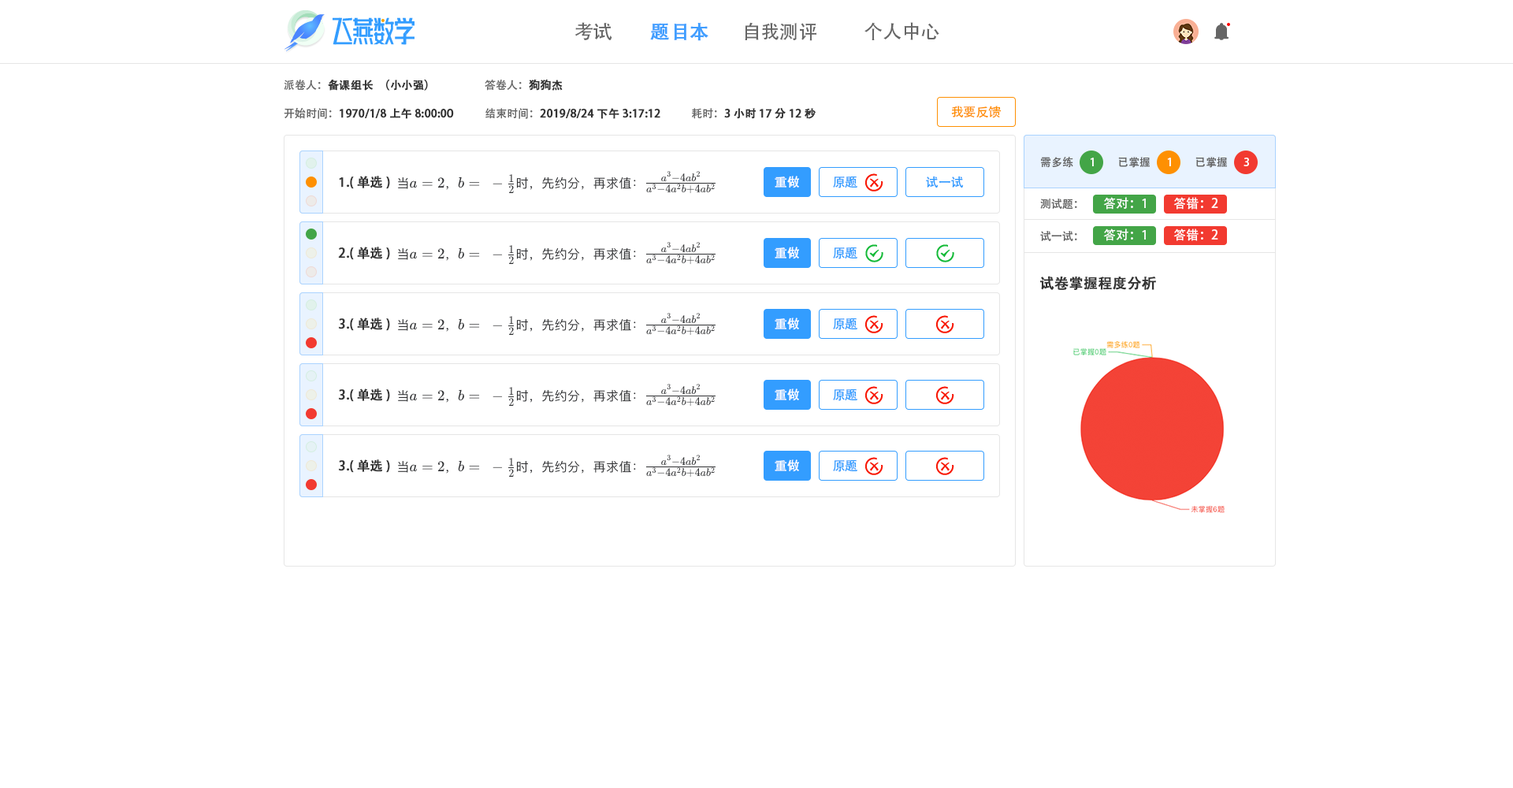
<style>
.page{position:relative;width:1513px;height:788px;background:#ffffff}
.page>*{position:absolute;margin:0}
.t1{font:18.9px "AdobeHeitiStd-Regular";color:#666666}
.t2{font:18.9px "AdobeHeitiStd-Regular";color:#409eff;font-weight:bold}
.t3{font:11px "AdobeHeitiStd-Regular";color:#333333;font-weight:bold}
.t4{font:11px "AdobeHeitiStd-Regular";color:#666666}
.t5{font:12.6px "AdobeHeitiStd-Regular";color:#fe9002}
.t6{font:11px "AdobeHeitiStd-Regular";color:#ffffff}
.t7{font:12.6px "AdobeHeitiStd-Regular";color:#333333;font-weight:bold}
.t8{font:12.6px "AdobeHeitiStd-Regular";color:#ffffff}
.t9{font:12.6px "AdobeHeitiStd-Regular";color:#339dff}
.t10{font:14.2px "AdobeHeitiStd-Regular";color:#333333;font-weight:bold}
</style>
<div class="page">
<p class="t1" style="left:575px;top:22px;width:37px;height:18px">考试</p>
<p class="t2" style="left:650px;top:23px;width:58px;height:18px">题目本</p>
<p class="t1" style="left:745px;top:22px;width:71px;height:19px">自我测评</p>
<p class="t1" style="left:865px;top:22px;width:74px;height:18px">个人中心</p>
<p class="t3" style="left:284px;top:80px;width:144px;height:11px"><span class="t4">派卷人：</span>备课组长（小小强）</p>
<p class="t4" style="left:485px;top:79px;width:78px;height:12px">答卷人：<span class="t3">狗狗杰</span></p>
<p class="t3" style="left:284px;top:108px;width:170px;height:11px"><span class="t4">开始时间：</span>1970/1/8 上午8:00:00</p>
<p class="t3" style="left:485px;top:108px;width:175px;height:11px"><span class="t4">结束时间：</span>2019/8/24 下午3:17:12</p>
<p class="t3" style="left:692px;top:108px;width:124px;height:11px"><span class="t4">耗时：</span>3小时17分12秒</p>
<p class="t5" style="left:951px;top:106px;width:51px;height:12px">我要反馈</p>
<p class="t4" style="left:1041px;top:157px;width:32px;height:11px">需多练</p>
<p class="t6" style="left:1090px;top:158px;width:4px;height:8px">1</p>
<p class="t4" style="left:1118px;top:157px;width:32px;height:11px">已掌握</p>
<p class="t6" style="left:1167px;top:158px;width:4px;height:8px">1</p>
<p class="t4" style="left:1196px;top:157px;width:31px;height:11px">已掌握</p>
<p class="t6" style="left:1244px;top:158px;width:5px;height:8px">3</p>
<p class="t7" style="left:339px;top:176px;width:51px;height:13px">1.(单选)</p>
<p class="t8" style="left:775px;top:176px;width:24px;height:12px">重做</p>
<p class="t9" style="left:833px;top:176px;width:24px;height:12px">原题</p>
<p class="t9" style="left:926px;top:176px;width:38px;height:12px">试一试</p>
<p class="t8" style="left:1103px;top:197px;width:43px;height:13px">答对：1</p>
<p class="t8" style="left:1173px;top:197px;width:45px;height:13px">答错：2</p>
<p class="t4" style="left:1040px;top:199px;width:37px;height:11px">测试题：</p>
<p class="t4" style="left:1040px;top:231px;width:37px;height:10px">试一试：</p>
<p class="t8" style="left:1103px;top:229px;width:43px;height:12px">答对：1</p>
<p class="t8" style="left:1173px;top:229px;width:45px;height:12px">答错：2</p>
<p class="t7" style="left:338px;top:247px;width:52px;height:13px">2.(单选)</p>
<p class="t8" style="left:775px;top:247px;width:24px;height:12px">重做</p>
<p class="t9" style="left:833px;top:247px;width:24px;height:12px">原题</p>
<p class="t10" style="left:1040px;top:276px;width:116px;height:14px">试卷掌握程度分析</p>
<p class="t7" style="left:338px;top:318px;width:52px;height:13px">3.(单选)</p>
<p class="t8" style="left:775px;top:318px;width:24px;height:12px">重做</p>
<p class="t9" style="left:833px;top:318px;width:24px;height:12px">原题</p>
<p class="t7" style="left:338px;top:389px;width:52px;height:13px">3.(单选)</p>
<p class="t8" style="left:775px;top:389px;width:24px;height:12px">重做</p>
<p class="t9" style="left:833px;top:389px;width:24px;height:12px">原题</p>
<p class="t7" style="left:338px;top:459px;width:52px;height:14px">3.(单选)</p>
<p class="t8" style="left:775px;top:459px;width:24px;height:13px">重做</p>
<p class="t9" style="left:833px;top:459px;width:24px;height:13px">原题</p>
</div>
